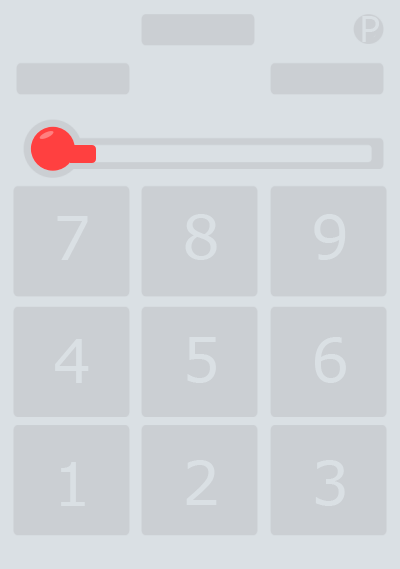
<style>
.page{position:relative;width:400px;height:569px;background:#cbcfd3}
.page>*{position:absolute;margin:0}
.t1{font:36px "Verdana";color:#dae0e4;scale:0.97 1}
.t2{font:60px "Verdana";color:#dae0e4}
</style>
<div class="page">
<p class="t1" style="left:362px;top:16px;width:17px;height:26px">P</p>
<p class="t2" style="left:57px;top:216px;width:31px;height:44px">7</p>
<p class="t2" style="left:185px;top:214px;width:32px;height:46px">8</p>
<p class="t2" style="left:314px;top:214px;width:32px;height:46px">9</p>
<p class="t2" style="left:55px;top:339px;width:34px;height:44px">4</p>
<p class="t2" style="left:187px;top:337px;width:29px;height:46px">5</p>
<p class="t2" style="left:315px;top:337px;width:31px;height:46px">6</p>
<p class="t2" style="left:61px;top:462px;width:24px;height:44px">1</p>
<p class="t2" style="left:186px;top:460px;width:31px;height:45px">2</p>
<p class="t2" style="left:315px;top:460px;width:30px;height:46px">3</p>
</div>
